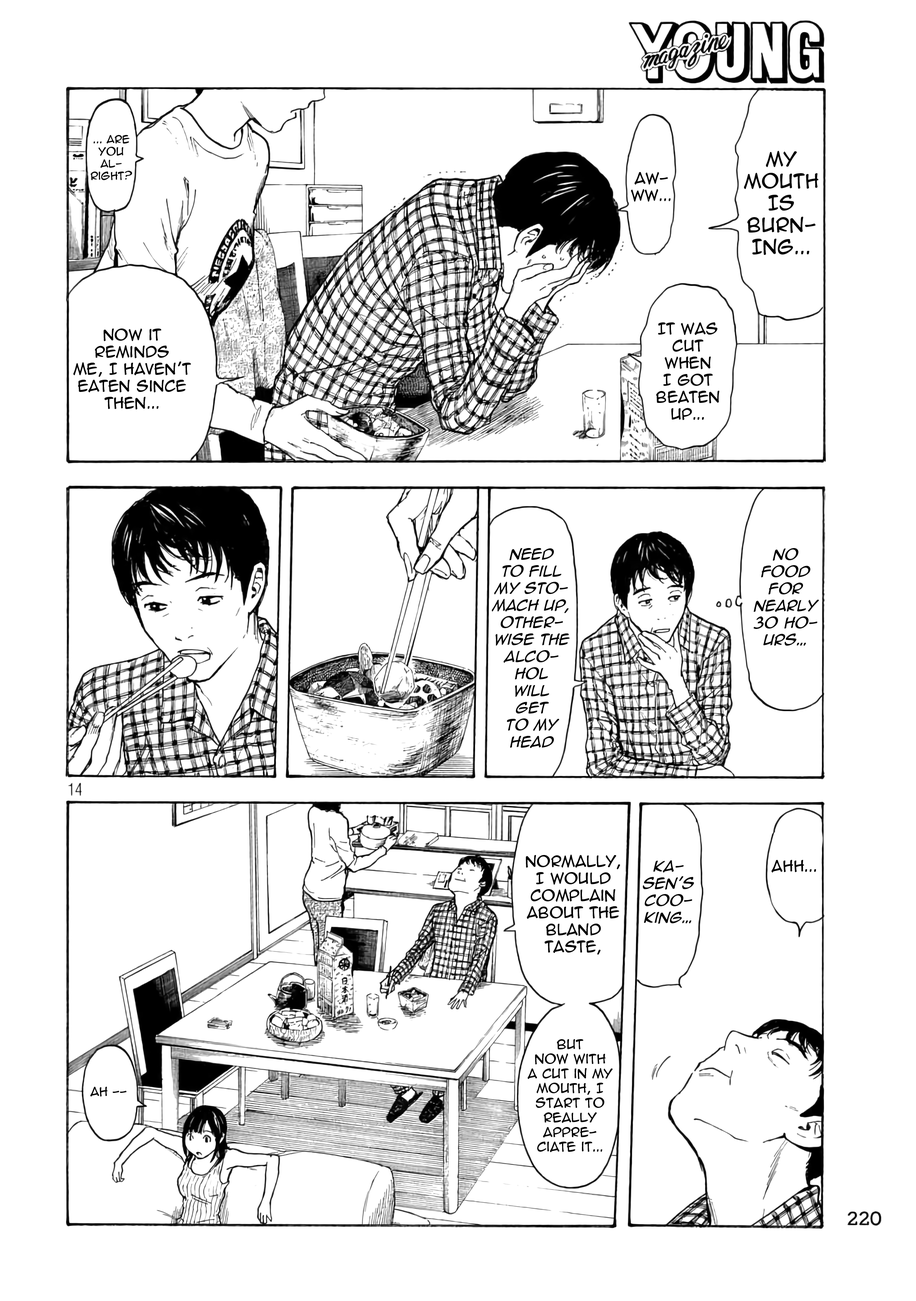
<style>
.page{position:relative;width:916px;height:1301px;background:#ffffff}
.page>*{position:absolute;margin:0}
.t1{font:10.2px "AnimeAce2.0BB";color:#000000}
.t2{font:18.3px "AnimeAce2.0BB";color:#000000;text-transform:uppercase}
.t3{font:14.2px "AnimeAce2.0BB";color:#000000}
.t4{font:14.2px "AnimeAce2.0BB-Italic";color:#000000}
.t5{font:12.2px "AnimeAce2.0BB";color:#000000}
.t6{font:11.4px "AnimeAce2.0BB";color:#000000}
</style>
<div class="page">
<p class="t1" style="left:91px;top:135px;width:41px;height:45px;text-align:center">... Are you al-<br>right?</p>
<p class="t2" style="left:744px;top:151px;width:75px;height:104px;text-align:center">My mouth is burn-<br>ing...</p>
<p class="t3" style="left:631px;top:172px;width:40px;height:30px;text-align:center">Aw-<br>ww...</p>
<p class="t3" style="left:73px;top:329px;width:118px;height:80px;text-align:center">Now it reminds <br>me, I haven’t eaten since then...</p>
<p class="t3" style="left:656px;top:322px;width:64px;height:98px;text-align:center">It was cut when <br>I got beaten up...</p>
<p class="t4" style="left:492px;top:548px;width:78px;height:200px;text-align:center">Need <br>to fill my sto-<br>mach up, other-<br>wise the alco-<br>hol <br>will <br>get <br>to my head</p>
<p class="t4" style="left:754px;top:548px;width:65px;height:98px;text-align:center">No food for nearly 30 ho-<br>urs…</p>
<p class="t3" style="left:526px;top:855px;width:94px;height:100px;text-align:center">Normally, I would complain about the bland taste,</p>
<p class="t4" style="left:643px;top:860px;width:51px;height:64px;text-align:center">Ka-<br>sen’s coo-<br>king…</p>
<p class="t3" style="left:772px;top:860px;width:44px;height:13px">Ahh...</p>
<p class="t5" style="left:528px;top:1039px;width:85px;height:113px;text-align:center">but <br>now with <br>a cut in my mouth, I start to really appre-<br>ciate it...</p>
<p class="t6" style="left:90px;top:1087px;width:37px;height:10px">Ah --</p>
</div>
